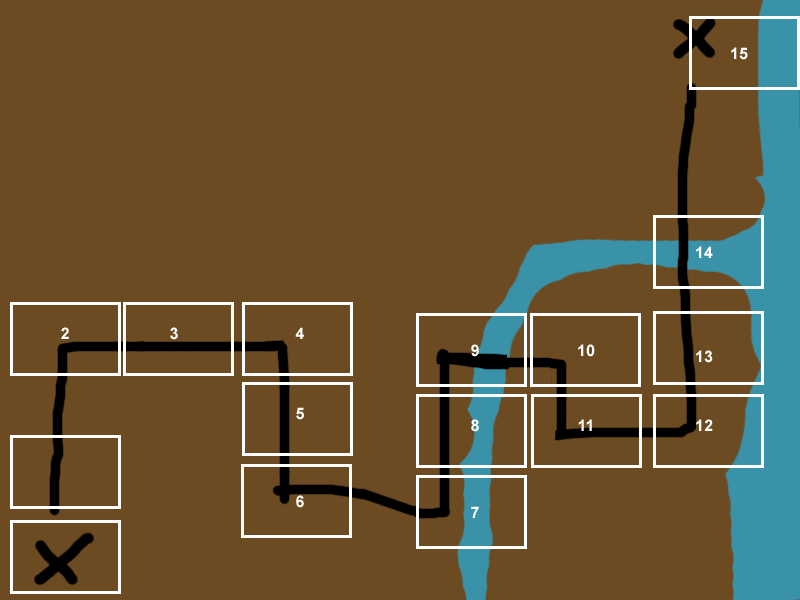
<style>
.page{position:relative;width:800px;height:600px;background:#6c4b22}
.page>*{position:absolute;margin:0}
.t1{font:16px "Arial-BoldMT";color:#ffffff}
</style>
<div class="page">
<p class="t1" style="left:731px;top:47px;width:17px;height:13px">15</p>
<p class="t1" style="left:696px;top:246px;width:17px;height:12px">14</p>
<p class="t1" style="left:61px;top:327px;width:8px;height:12px">2</p>
<p class="t1" style="left:170px;top:327px;width:8px;height:13px">3</p>
<p class="t1" style="left:295px;top:327px;width:9px;height:12px">4</p>
<p class="t1" style="left:471px;top:344px;width:8px;height:13px">9</p>
<p class="t1" style="left:578px;top:344px;width:17px;height:13px">10</p>
<p class="t1" style="left:696px;top:350px;width:17px;height:13px">13</p>
<p class="t1" style="left:296px;top:407px;width:8px;height:13px">5</p>
<p class="t1" style="left:471px;top:419px;width:8px;height:13px">8</p>
<p class="t1" style="left:578px;top:419px;width:14px;height:12px">11</p>
<p class="t1" style="left:696px;top:419px;width:17px;height:12px">12</p>
<p class="t1" style="left:296px;top:495px;width:8px;height:13px">6</p>
<p class="t1" style="left:471px;top:506px;width:8px;height:12px">7</p>
</div>
